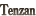
<style>
.page{position:relative;width:36px;height:16px;background:#ffffff}
.page>*{position:absolute;margin:0}
.t1{font:14px "RyuminPro-ExBold";letter-spacing:-0.08em;color:#4a3f32;font-weight:bold;scale:0.8 1}
</style>
<div class="page">
<p class="t1" style="left:0px;top:4px;width:36px;height:12px">Tenzan</p>
</div>
